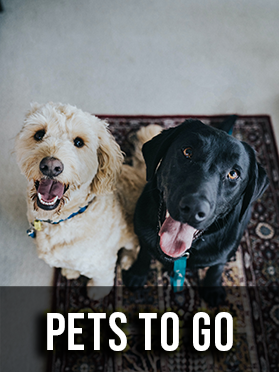
<style>
.page{position:relative;width:279px;height:372px}
.page>*{position:absolute;margin:0}
.t1{font:53px "BebasNeue-Regular";letter-spacing:0.025em;color:#ffffff}
</style>
<div class="page">
<p class="t1" style="left:47px;top:312px;width:186px;height:39px">Pets to go</p>
</div>
